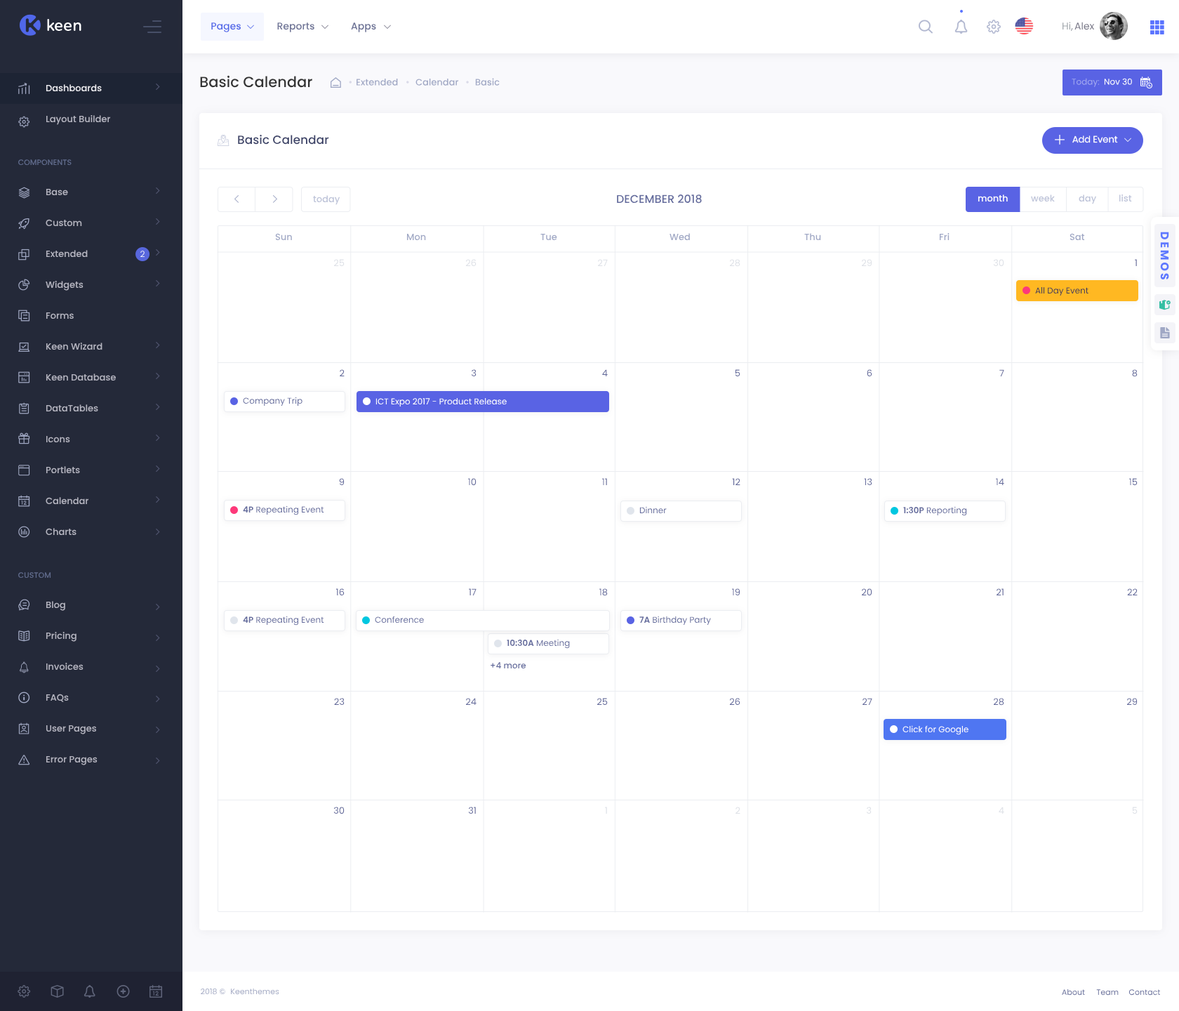
<style>
.page{position:relative;width:1179px;height:1011px;background:#ffffff}
.page>*{position:absolute;margin:0}
.t1{font:9.8px "Poppins-Medium";color:#5067e9}
.t2{font:9.8px "Poppins-Medium";color:#6b7195}
.t3{font:9.8px "Poppins-Regular";color:#9ea4a9}
.t4{font:9.8px "Poppins-Regular";color:#868e96}
.t5{font:9.8px "Poppins-Regular";color:#757485}
.t6{font:14.7px "Poppins-Medium";color:#333333}
.t7{font:9.1px "Poppins-Medium";color:#a0a8c5}
.t8{font:8.4px "Poppins-Regular";color:#a2a8f0}
.t9{font:8.4px "Poppins-Regular";color:#ffffff}
.t10{font:9.1px "Poppins-Medium";color:#ededf2}
.t11{font:9.8px "Poppins-Regular";color:#dadae8}
.t12{font:9.1px "Poppins-Medium";color:#b5b5c1}
.t13{font:11.9px "Poppins-Medium";color:#3c4368}
.t14{font:9.1px "Poppins-Regular";color:#ffffff}
.t15{font:7.7px "Poppins-Medium";color:#606b8c;text-transform:uppercase}
.t16{font:9.1px "Poppins-Medium";color:#bec4d9}
.t17{font:11.2px "Poppins-Medium";color:#636b9d}
.t18{font:9.1px "Poppins-Medium";color:#ffffff}
.t19{font:8.4px "Poppins-Light";color:#ffffff}
.t20{font:9.1px "Poppins-Regular";color:#dee1e7}
.t21{font:9.1px "Poppins-Regular"}
.t22{font:8.4px "Poppins-Regular";color:#3d3b56}
.t23{font:9.1px "Poppins-Regular";color:#636a9b}
.t24{font:8.4px "Poppins-Regular";color:#636b9d}
.t25{font:8.4px "Poppins-SemiBold";color:#636b9d}
.t26{font:8.4px "Poppins-Medium";color:#636b9d}
.t27{font:7.8px "Poppins-Regular";color:#a1a8c3}
.t28{font:7.8px "Poppins-Regular";color:#646c9a}
</style>
<div class="page">
<p class="t1" style="left:211px;top:22px;width:31px;height:10px">Pages</p>
<p class="t2" style="left:277px;top:22px;width:38px;height:10px">Reports</p>
<p class="t2" style="left:351px;top:22px;width:25px;height:10px">Apps</p>
<p class="t3" style="left:1063px;top:22px;width:10px;height:9px">Hi<span class="t4">,</span></p>
<p class="t5" style="left:1075px;top:22px;width:20px;height:8px">Alex</p>
<p class="t6" style="left:200px;top:75px;width:112px;height:13px">Basic Calendar</p>
<p class="t7" style="left:357px;top:78px;width:41px;height:8px">Extended</p>
<p class="t7" style="left:416px;top:78px;width:43px;height:8px">Calendar</p>
<p class="t7" style="left:475px;top:78px;width:25px;height:8px">Basic</p>
<p class="t8" style="left:1072px;top:78px;width:28px;height:9px">Today:</p>
<p class="t9" style="left:1104px;top:78px;width:28px;height:7px">Nov 30</p>
<p class="t10" style="left:46px;top:84px;width:56px;height:8px">Dashboards</p>
<p class="t11" style="left:349px;top:81px;width:3px;height:3px">•</p>
<p class="t11" style="left:406px;top:81px;width:3px;height:3px">•</p>
<p class="t11" style="left:466px;top:81px;width:3px;height:3px">•</p>
<p class="t12" style="left:46px;top:114px;width:65px;height:11px">Layout Builder</p>
<p class="t13" style="left:238px;top:134px;width:91px;height:11px">Basic Calendar</p>
<p class="t14" style="left:1073px;top:135px;width:45px;height:8px">Add Event</p>
<p class="t15" style="left:18px;top:159px;width:54px;height:7px">Components</p>
<p class="t12" style="left:46px;top:188px;width:22px;height:8px">Base</p>
<p class="t16" style="left:313px;top:195px;width:28px;height:10px">today</p>
<p class="t17" style="left:617px;top:194px;width:85px;height:10px">DECEMBER 2018</p>
<p class="t18" style="left:978px;top:194px;width:30px;height:7px">month</p>
<p class="t16" style="left:1031px;top:194px;width:24px;height:7px">week</p>
<p class="t16" style="left:1079px;top:194px;width:18px;height:10px">day</p>
<p class="t16" style="left:1120px;top:194px;width:12px;height:7px">list</p>
<p class="t12" style="left:46px;top:219px;width:36px;height:8px">Custom</p>
<p class="t7" style="left:275px;top:233px;width:17px;height:8px">Sun</p>
<p class="t7" style="left:406px;top:233px;width:20px;height:8px">Mon</p>
<p class="t7" style="left:541px;top:233px;width:16px;height:8px">Tue</p>
<p class="t7" style="left:670px;top:233px;width:20px;height:8px">Wed</p>
<p class="t7" style="left:805px;top:233px;width:16px;height:7px">Thu</p>
<p class="t7" style="left:939px;top:233px;width:11px;height:7px">Fri</p>
<p class="t7" style="left:1070px;top:233px;width:15px;height:7px">Sat</p>
<p class="t12" style="left:46px;top:250px;width:42px;height:8px">Extended</p>
<p class="t19" style="left:140px;top:251px;width:5px;height:6px">2</p>
<p class="t20" style="left:334px;top:259px;width:11px;height:8px">25</p>
<p class="t20" style="left:465px;top:259px;width:12px;height:8px">26</p>
<p class="t20" style="left:598px;top:259px;width:10px;height:7px">27</p>
<p class="t20" style="left:729px;top:259px;width:12px;height:8px">28</p>
<p class="t20" style="left:861px;top:259px;width:12px;height:7px">29</p>
<p class="t20" style="left:993px;top:259px;width:12px;height:7px">30</p>
<p class="t21" style="left:1135px;top:259px;width:2px;height:7px">1</p>
<p class="t12" style="left:46px;top:280px;width:38px;height:11px">Widgets</p>
<p class="t22" style="left:1036px;top:287px;width:53px;height:9px">All Day Event</p>
<p class="t12" style="left:46px;top:312px;width:28px;height:7px">Forms</p>
<p class="t12" style="left:46px;top:342px;width:57px;height:8px">Keen Wizard</p>
<p class="t12" style="left:46px;top:374px;width:70px;height:7px">Keen Database</p>
<p class="t23" style="left:340px;top:369px;width:5px;height:7px">2</p>
<p class="t23" style="left:471px;top:369px;width:6px;height:8px">3</p>
<p class="t23" style="left:602px;top:369px;width:6px;height:7px">4</p>
<p class="t23" style="left:735px;top:369px;width:6px;height:7px">5</p>
<p class="t23" style="left:867px;top:369px;width:6px;height:7px">6</p>
<p class="t23" style="left:1000px;top:369px;width:5px;height:7px">7</p>
<p class="t23" style="left:1132px;top:369px;width:6px;height:8px">8</p>
<p class="t24" style="left:243px;top:397px;width:60px;height:9px">Company Trip</p>
<p class="t9" style="left:376px;top:398px;width:131px;height:9px">ICT Expo 2017 - Product Release</p>
<p class="t12" style="left:46px;top:404px;width:52px;height:8px">DataTables</p>
<p class="t12" style="left:46px;top:435px;width:24px;height:8px">Icons</p>
<p class="t12" style="left:46px;top:466px;width:34px;height:8px">Portlets</p>
<p class="t23" style="left:339px;top:478px;width:6px;height:8px">9</p>
<p class="t23" style="left:468px;top:478px;width:9px;height:7px">10</p>
<p class="t21" style="left:602px;top:478px;width:5px;height:7px">11</p>
<p class="t23" style="left:732px;top:478px;width:9px;height:7px">12</p>
<p class="t23" style="left:864px;top:478px;width:9px;height:7px">13</p>
<p class="t23" style="left:996px;top:478px;width:9px;height:7px">14</p>
<p class="t23" style="left:1130px;top:478px;width:8px;height:7px">15</p>
<p class="t12" style="left:46px;top:497px;width:42px;height:8px">Calendar</p>
<p class="t24" style="left:243px;top:505px;width:81px;height:10px"><span class="t25">4P</span> Repeating Event</p>
<p class="t24" style="left:640px;top:506px;width:27px;height:8px">Dinner</p>
<p class="t24" style="left:904px;top:506px;width:63px;height:10px"><span class="t25">1:30P</span> Reporting</p>
<p class="t12" style="left:46px;top:528px;width:31px;height:8px">Charts</p>
<p class="t15" style="left:18px;top:572px;width:33px;height:7px">Custom</p>
<p class="t23" style="left:336px;top:588px;width:9px;height:8px">16</p>
<p class="t23" style="left:469px;top:588px;width:8px;height:7px">17</p>
<p class="t23" style="left:600px;top:588px;width:8px;height:8px">18</p>
<p class="t23" style="left:732px;top:588px;width:9px;height:7px">19</p>
<p class="t23" style="left:862px;top:588px;width:11px;height:7px">20</p>
<p class="t23" style="left:997px;top:588px;width:7px;height:7px">21</p>
<p class="t23" style="left:1128px;top:588px;width:10px;height:7px">22</p>
<p class="t12" style="left:46px;top:601px;width:19px;height:10px">Blog</p>
<p class="t24" style="left:243px;top:616px;width:81px;height:10px"><span class="t25">4P</span> Repeating Event</p>
<p class="t24" style="left:375px;top:616px;width:49px;height:7px">Conference</p>
<p class="t24" style="left:640px;top:616px;width:71px;height:10px"><span class="t25">7A</span> Birthday Party</p>
<p class="t12" style="left:46px;top:631px;width:31px;height:11px">Pricing</p>
<p class="t24" style="left:507px;top:639px;width:63px;height:10px"><span class="t25">10:30A</span> Meeting</p>
<p class="t12" style="left:46px;top:662px;width:38px;height:8px">Invoices</p>
<p class="t26" style="left:491px;top:662px;width:36px;height:7px">+4 more</p>
<p class="t12" style="left:46px;top:694px;width:23px;height:8px">FAQs</p>
<p class="t23" style="left:334px;top:698px;width:11px;height:8px">23</p>
<p class="t23" style="left:466px;top:698px;width:11px;height:7px">24</p>
<p class="t23" style="left:597px;top:698px;width:11px;height:8px">25</p>
<p class="t23" style="left:729px;top:698px;width:12px;height:7px">26</p>
<p class="t23" style="left:863px;top:698px;width:10px;height:7px">27</p>
<p class="t23" style="left:993px;top:698px;width:12px;height:8px">28</p>
<p class="t23" style="left:1127px;top:698px;width:11px;height:7px">29</p>
<p class="t12" style="left:46px;top:725px;width:51px;height:9px">User Pages</p>
<p class="t9" style="left:903px;top:725px;width:66px;height:10px">Click for Google</p>
<p class="t12" style="left:46px;top:755px;width:52px;height:10px">Error Pages</p>
<p class="t23" style="left:333px;top:807px;width:12px;height:7px">30</p>
<p class="t23" style="left:468px;top:807px;width:8px;height:7px">31</p>
<p class="t20" style="left:605px;top:807px;width:2px;height:7px">1</p>
<p class="t20" style="left:736px;top:807px;width:5px;height:7px">2</p>
<p class="t20" style="left:867px;top:807px;width:5px;height:7px">3</p>
<p class="t20" style="left:999px;top:807px;width:6px;height:7px">4</p>
<p class="t20" style="left:1132px;top:807px;width:6px;height:7px">5</p>
<p class="t27" style="left:201px;top:989px;width:24px;height:6px">2018 ©</p>
<p class="t27" style="left:231px;top:989px;width:48px;height:6px">Keenthemes</p>
<p class="t28" style="left:1062px;top:989px;width:23px;height:7px">About</p>
<p class="t28" style="left:1097px;top:989px;width:22px;height:7px">Team</p>
<p class="t28" style="left:1129px;top:989px;width:32px;height:7px">Contact</p>
</div>
